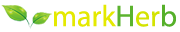
<style>
.page{position:relative;width:180px;height:32px;background:#ffffff}
.page>*{position:absolute;margin:0}
.t1{font:30px "MyriadPro-Regular";color:#e4e900}
.t2{font:30px "MyriadPro-Regular";color:#5bb32e}
.t3{font:30px "MyriadPro-Regular";color:#d3e300}
.t4{font:30px "MyriadPro-Regular";color:#56b02a}
</style>
<div class="page">
<p class="t1" style="left:54px;top:4px;width:122px;height:23px">mark<span class="t2">H</span><span class="t3">er</span><span class="t4">b</span></p>
</div>
